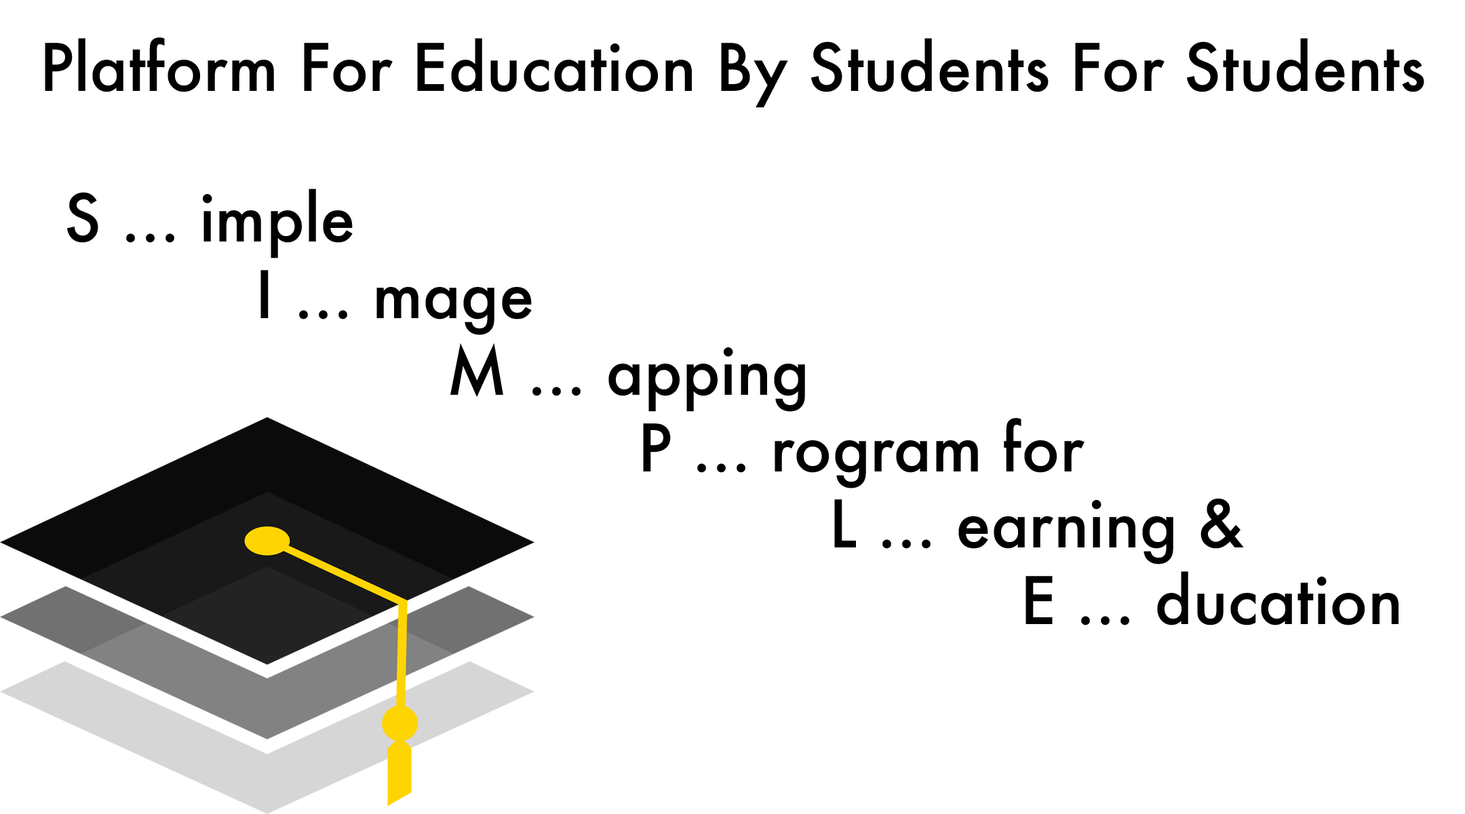
<style>
.page{position:relative;width:1465px;height:814px;background:#ffffff}
.page>*{position:absolute;margin:0}
.t1{font:63.8px "Futura-Medium";color:#000000}
</style>
<div class="page">
<p class="t1" style="left:45px;top:37px;width:1379px;height:71px">Platform For Education By Students For Students</p>
<p class="t1" style="left:67px;top:189px;width:1332px;height:436px">S ... imple<br> I ... mage<br>  M ... apping<br>   P ... rogram for<br>    L ... earning &amp;<br>     E ... ducation</p>
</div>
